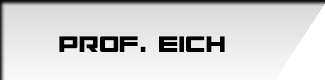
<style>
.page{position:relative;width:325px;height:80px}
.page>*{position:absolute;margin:0}
.t1{font:16.7px "Electric-Toaster";color:#000000}
</style>
<div class="page">
<p class="t1" style="left:59px;top:36px;width:166px;height:16px">Prof. Eich</p>
</div>
